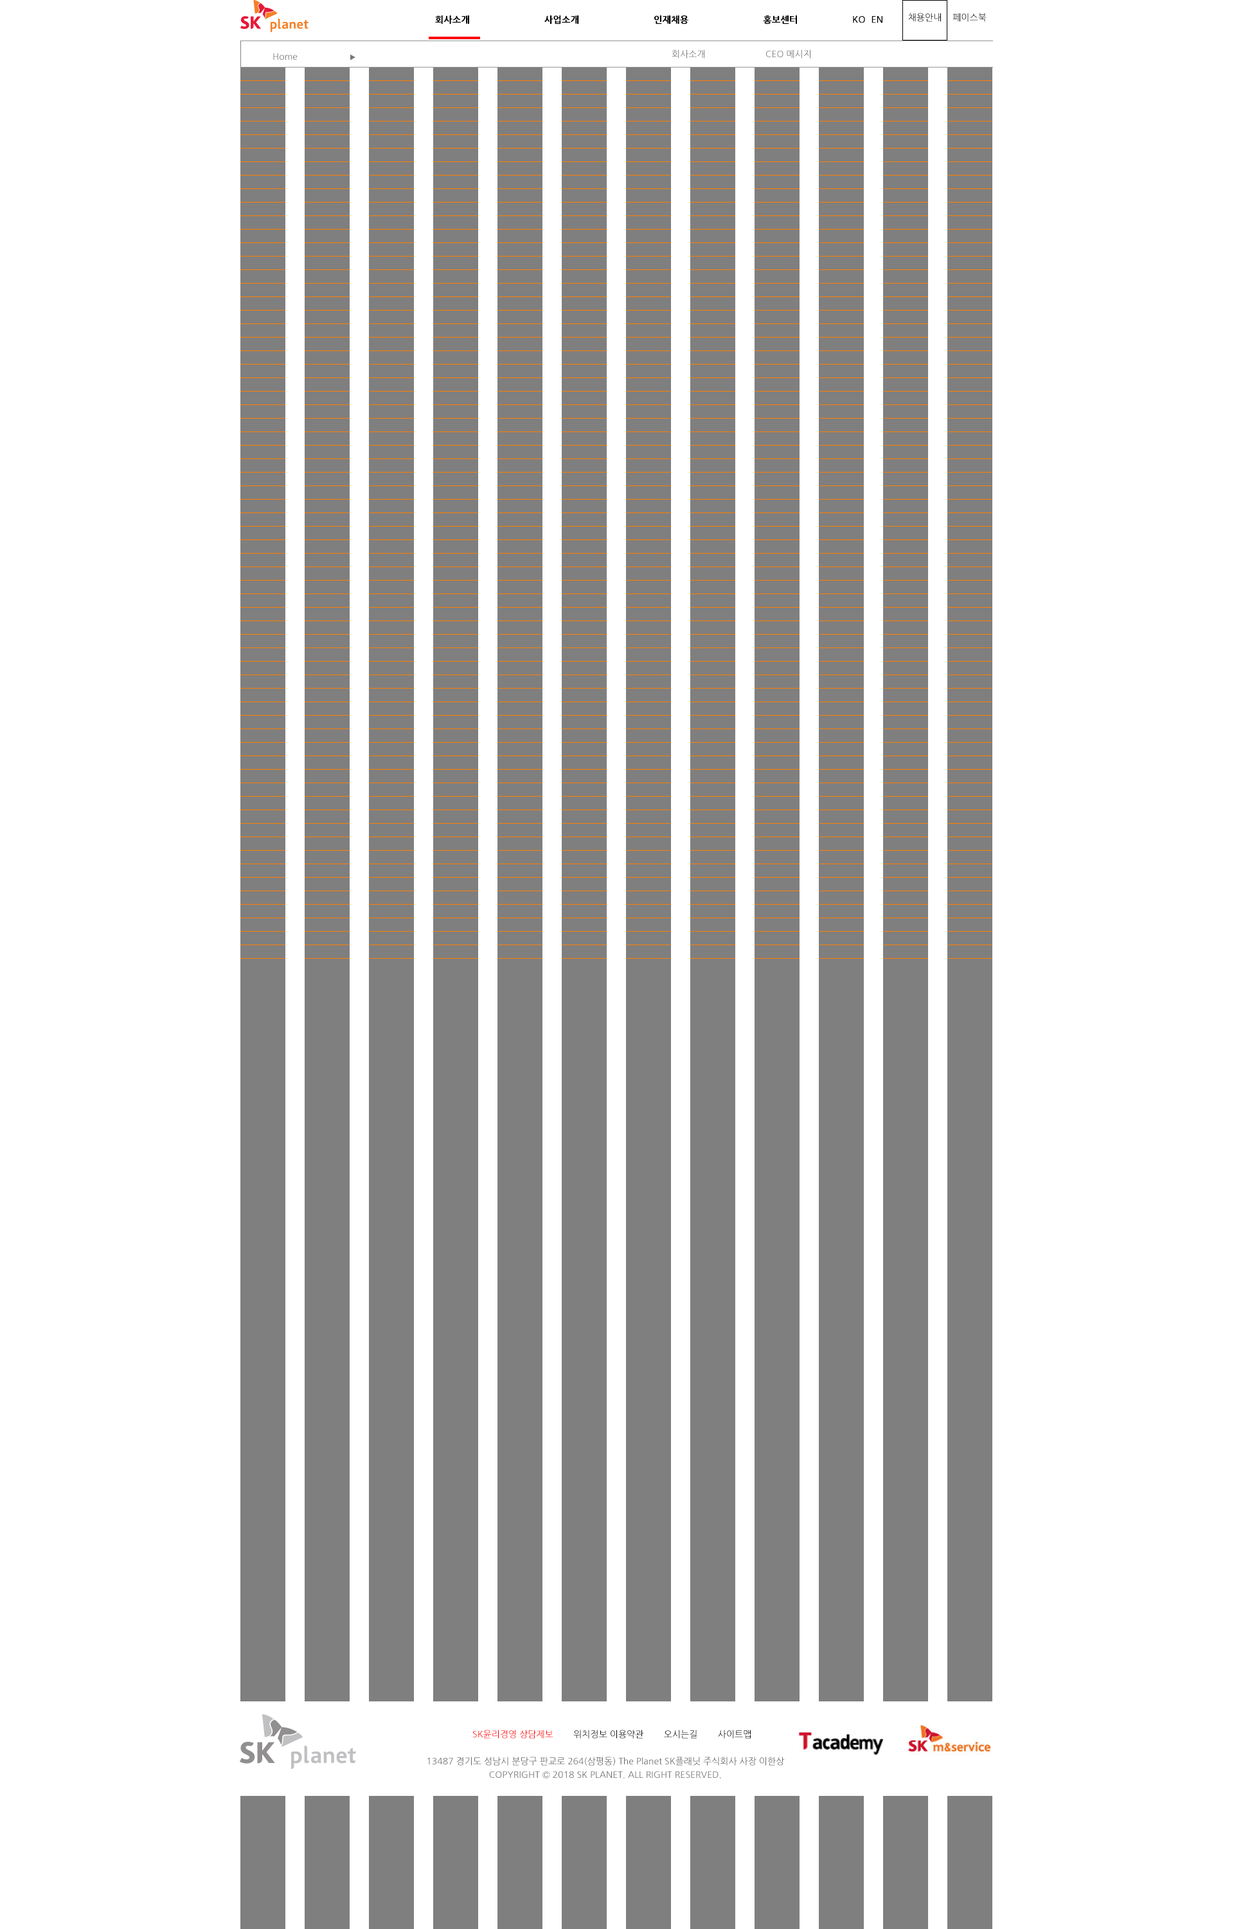
<style>
.page{position:relative;width:1234px;height:1929px;background:#ffffff}
.page>*{position:absolute;margin:0}
.t1{font:9px "NanumGothicBold";color:#000000;font-weight:bold}
.t2{font:9px "NanumGothic";color:#000000;font-weight:bold}
.t3{font:9px "NanumGothic";color:#000000}
.t4{font:9px "NanumGothic";color:#777777}
.t5{font:9px "NanumGothic";color:#ff0000}
.t6{font:9px "NanumGothic";color:#666666}
</style>
<div class="page">
<p class="t1" style="left:435px;top:15px;width:362px;height:9px">회사소개                           사업소개                           인재채용                           홍보센터</p>
<p class="t2" style="left:853px;top:16px;width:30px;height:7px">KO  EN</p>
<p class="t3" style="left:908px;top:13px;width:33px;height:9px">채용안내</p>
<p class="t3" style="left:953px;top:13px;width:34px;height:9px">페이스북</p>
<p class="t4" style="left:273px;top:53px;width:25px;height:7px">Home</p>
<p class="t4" style="left:672px;top:50px;width:33px;height:9px">회사소개</p>
<p class="t4" style="left:766px;top:50px;width:45px;height:9px">CEO 메시지</p>
<p class="t3" style="left:473px;top:1729px;width:278px;height:9px"><span class="t5">SK윤리경영 상담제보</span>        위치정보 이용약관        오시는길        사이트맵</p>
<p class="t6" style="left:428px;top:1756px;width:357px;height:22px;text-align:center">13487 경기도 성남시 분당구 판교로 264(삼평동) The Planet SK플래닛 주식회사 사장 이한상<br>COPYRIGHT © 2018 SK PLANET. ALL RIGHT RESERVED.</p>
</div>
